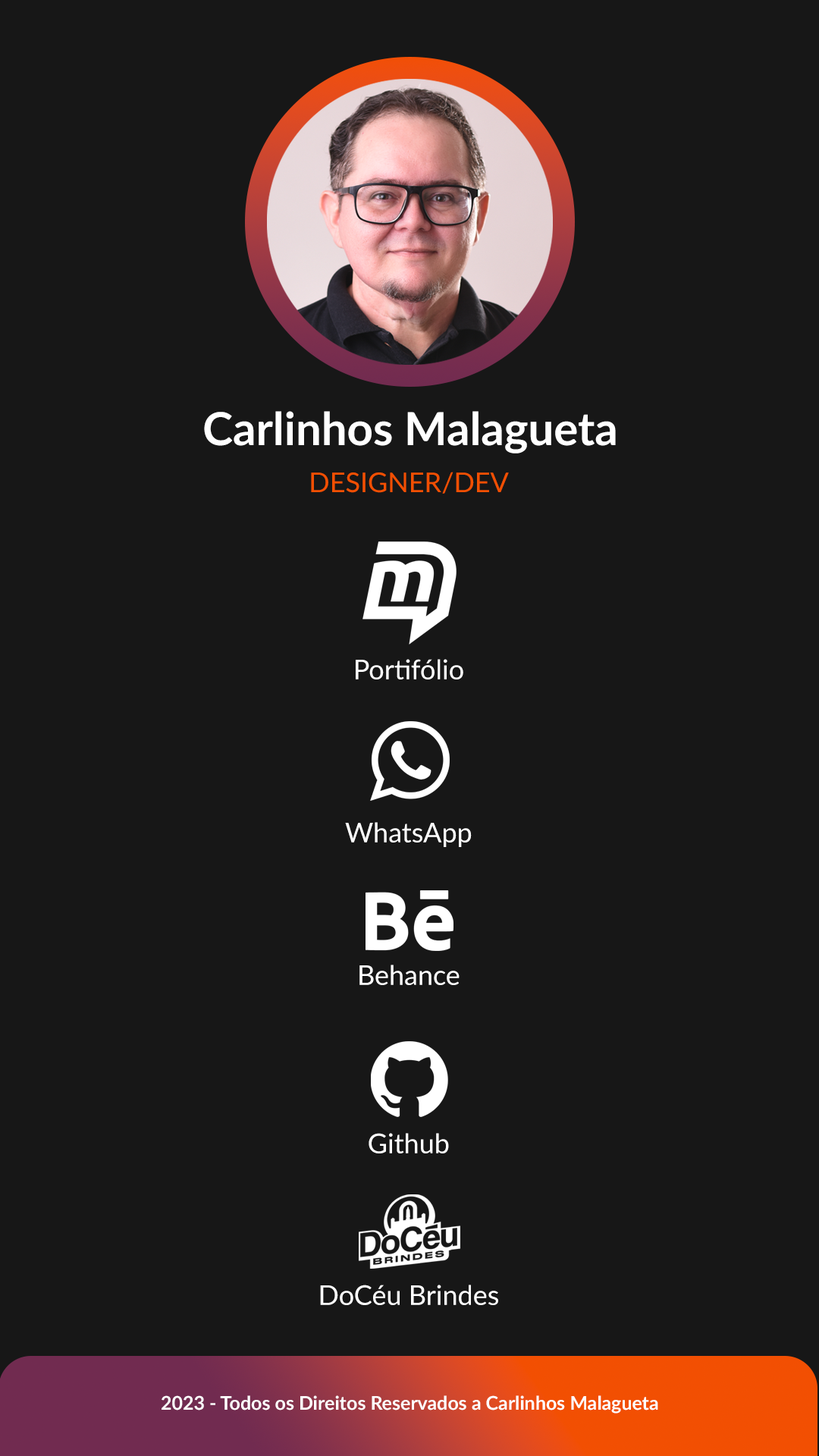
<style>
.page{position:relative;width:819px;height:1456px;background:#171717}
.page>*{position:absolute;margin:0}
.t1{font:45.5px "Lato-Bold";color:#ffffff}
.t2{font:27.3px "Lato-Regular";color:#f24f02}
.t3{font:27.3px "Lato-Regular";color:#ffffff}
.t4{font:19px "Lato-Bold";color:#fefefe}
</style>
<div class="page">
<p class="t1" style="left:204px;top:411px;width:412px;height:42px">Carlinhos Malagueta</p>
<p class="t2" style="left:311px;top:472px;width:198px;height:22px">DESIGNER/DEV</p>
<p class="t3" style="left:356px;top:659px;width:107px;height:20px">Portifólio</p>
<p class="t3" style="left:345px;top:822px;width:127px;height:25px">WhatsApp</p>
<p class="t3" style="left:359px;top:965px;width:101px;height:20px">Behance</p>
<p class="t3" style="left:369px;top:1133px;width:80px;height:20px">Github</p>
<p class="t3" style="left:320px;top:1285px;width:178px;height:20px">DoCéu Brindes</p>
<p class="t4" style="left:162px;top:1395px;width:496px;height:19px">2023 - Todos os Direitos Reservados a Carlinhos Malagueta</p>
</div>
